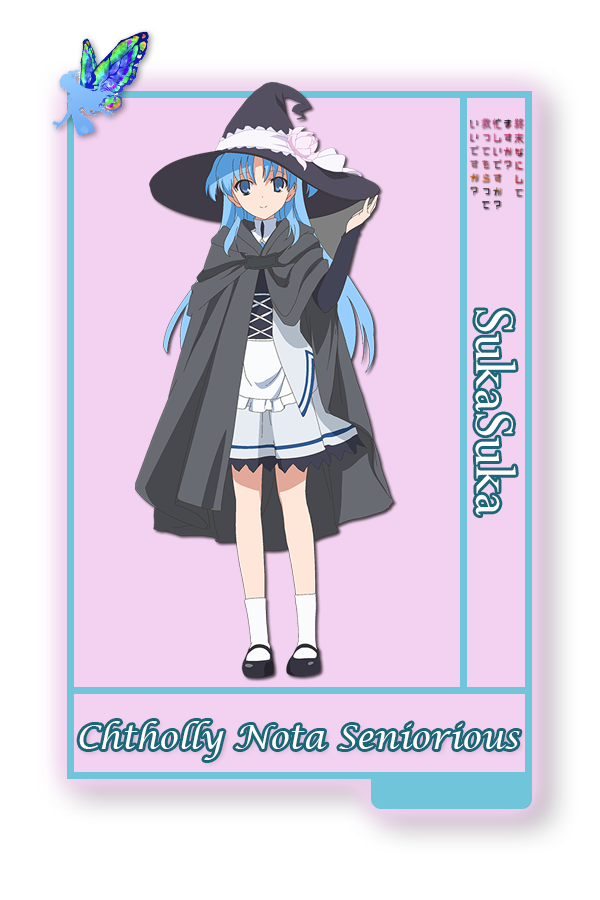
<style>
.page{position:relative;width:600px;height:900px;background:#f3d2f1}
.page>*{position:absolute;margin:0}
.t1{font:62.5px "Perpetua";color:#ffffff}
.t2{font:33.3px "LucidaCalligraphy-Italic";color:#ffffff}
</style>
<div class="page">
<p class="t1" style="left:475px;top:310px;width:41px;height:206px;rotate:90deg">SukaSuka</p>
<p class="t2" style="left:79px;top:721px;width:441px;height:39px">Chtholly Nota Seniorious</p>
</div>
